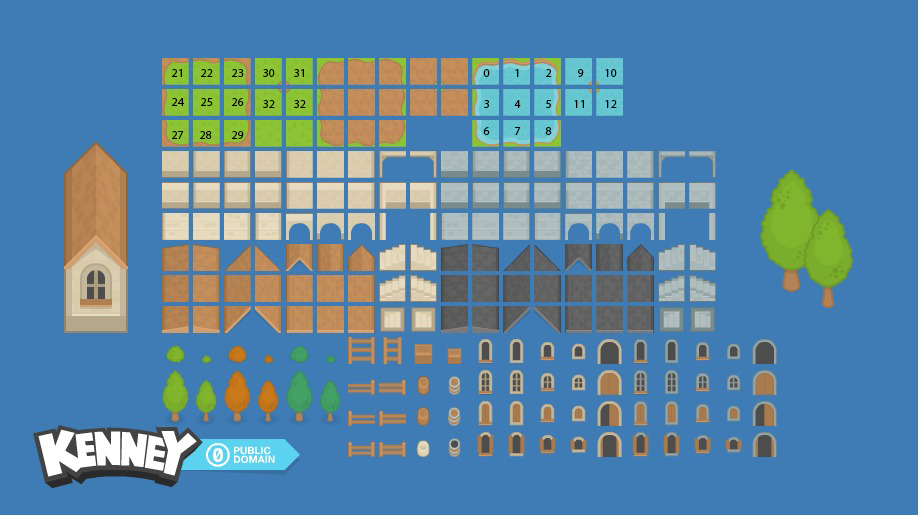
<style>
.page{position:relative;width:918px;height:515px;background:#3f7cb5}
.page>*{position:absolute;margin:0}
.t1{font:12px "MyriadPro-Regular";color:#000000}
</style>
<div class="page">
<p class="t1" style="left:172px;top:69px;width:10px;height:8px">21</p>
<p class="t1" style="left:201px;top:69px;width:12px;height:8px">22</p>
<p class="t1" style="left:232px;top:69px;width:12px;height:8px">23</p>
<p class="t1" style="left:263px;top:69px;width:12px;height:8px">30</p>
<p class="t1" style="left:294px;top:69px;width:10px;height:8px">31</p>
<p class="t1" style="left:483px;top:69px;width:7px;height:8px">0</p>
<p class="t1" style="left:515px;top:69px;width:4px;height:8px">1</p>
<p class="t1" style="left:546px;top:69px;width:6px;height:8px">2</p>
<p class="t1" style="left:578px;top:69px;width:6px;height:8px">9</p>
<p class="t1" style="left:605px;top:69px;width:12px;height:8px">10</p>
<p class="t1" style="left:172px;top:98px;width:13px;height:8px">24</p>
<p class="t1" style="left:201px;top:98px;width:12px;height:8px">25</p>
<p class="t1" style="left:232px;top:98px;width:12px;height:8px">26</p>
<p class="t1" style="left:263px;top:100px;width:12px;height:8px">32</p>
<p class="t1" style="left:294px;top:100px;width:12px;height:8px">32</p>
<p class="t1" style="left:484px;top:100px;width:5px;height:8px">3</p>
<p class="t1" style="left:514px;top:100px;width:7px;height:8px">4</p>
<p class="t1" style="left:546px;top:100px;width:5px;height:8px">5</p>
<p class="t1" style="left:574px;top:100px;width:10px;height:8px">11</p>
<p class="t1" style="left:605px;top:100px;width:12px;height:8px">12</p>
<p class="t1" style="left:172px;top:131px;width:12px;height:8px">27</p>
<p class="t1" style="left:200px;top:131px;width:12px;height:8px">28</p>
<p class="t1" style="left:232px;top:131px;width:12px;height:8px">29</p>
<p class="t1" style="left:483px;top:127px;width:7px;height:8px">6</p>
<p class="t1" style="left:515px;top:127px;width:6px;height:8px">7</p>
<p class="t1" style="left:545px;top:127px;width:7px;height:8px">8</p>
</div>
